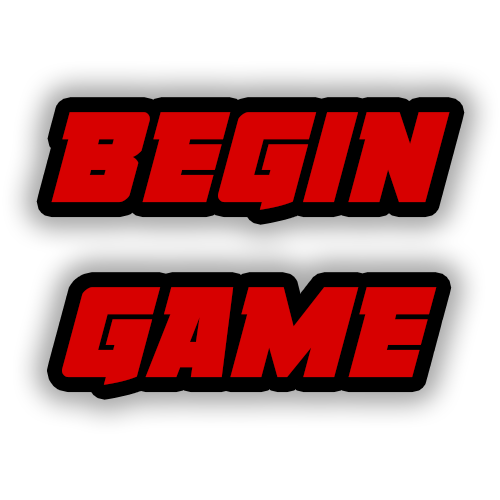
<style>
.page{position:relative;width:500px;height:500px;background:#ffffff}
.page>*{position:absolute;margin:0}
.t1{font:145.8px "LibertyLegionItalic";color:#d70000}
</style>
<div class="page">
<p class="t1" style="left:51px;top:112px;width:399px;height:273px;text-align:center">Begin<br>Game</p>
</div>
